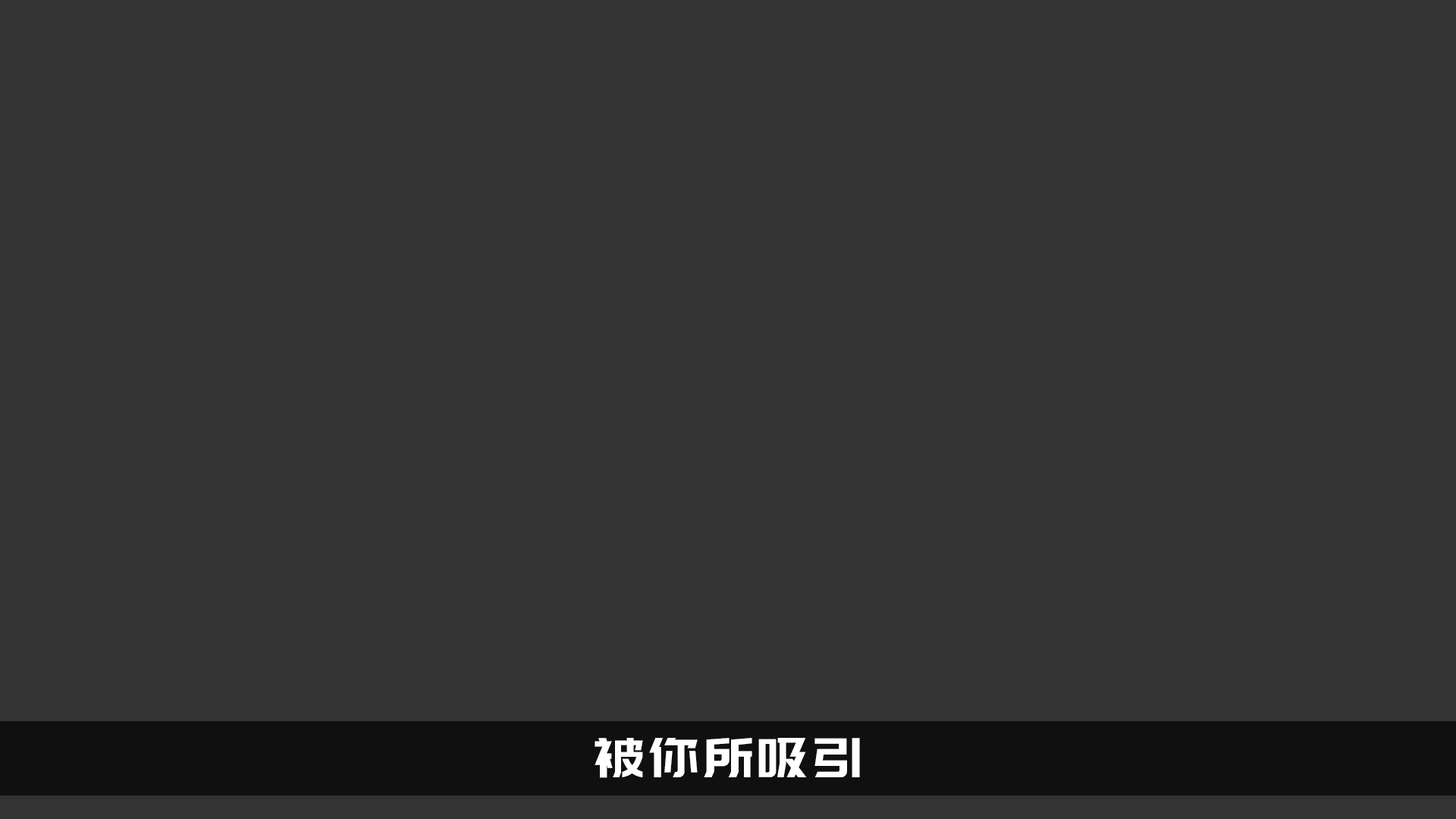
<style>
.page{position:relative;width:1456px;height:819px;background:#333333}
.page>*{position:absolute;margin:0}
.t1{font:54.6px "PangMenZhengDao-3";color:#ffffff}
</style>
<div class="page">
<p class="t1" style="left:595px;top:738px;width:265px;height:40px">被你所吸引</p>
</div>
